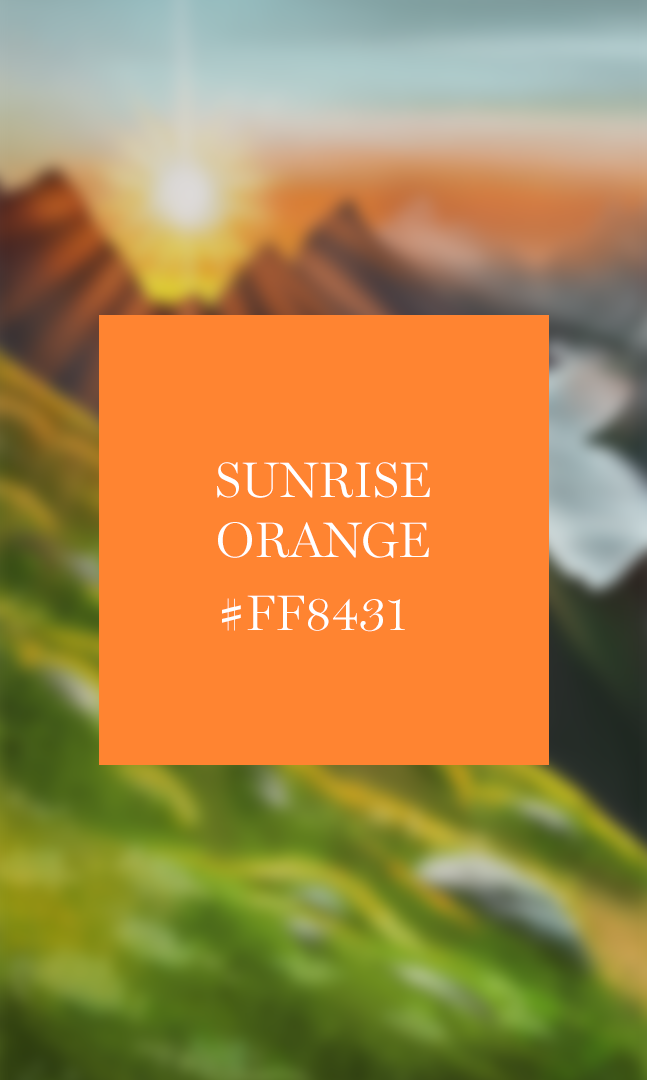
<style>
.page{position:relative;width:647px;height:1080px;background:#ff8431}
.page>*{position:absolute;margin:0}
.t1{font:50px "MillerDisplay-Light";color:#ffffff}
</style>
<div class="page">
<p class="t1" style="left:217px;top:462px;width:213px;height:97px;text-align:center">SUNRISE<br>ORANGE</p>
<p class="t1" style="left:222px;top:595px;width:183px;height:37px">#FF8431</p>
</div>
